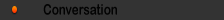
<style>
.page{position:relative;width:224px;height:20px;background:#333333}
.page>*{position:absolute;margin:0}
.t1{font:14.9px "ArialRoundedMTBold";color:#030303;scale:0.78 1}
</style>
<div class="page">
<p class="t1" style="left:43px;top:4px;width:74px;height:11px">Conversation</p>
</div>
